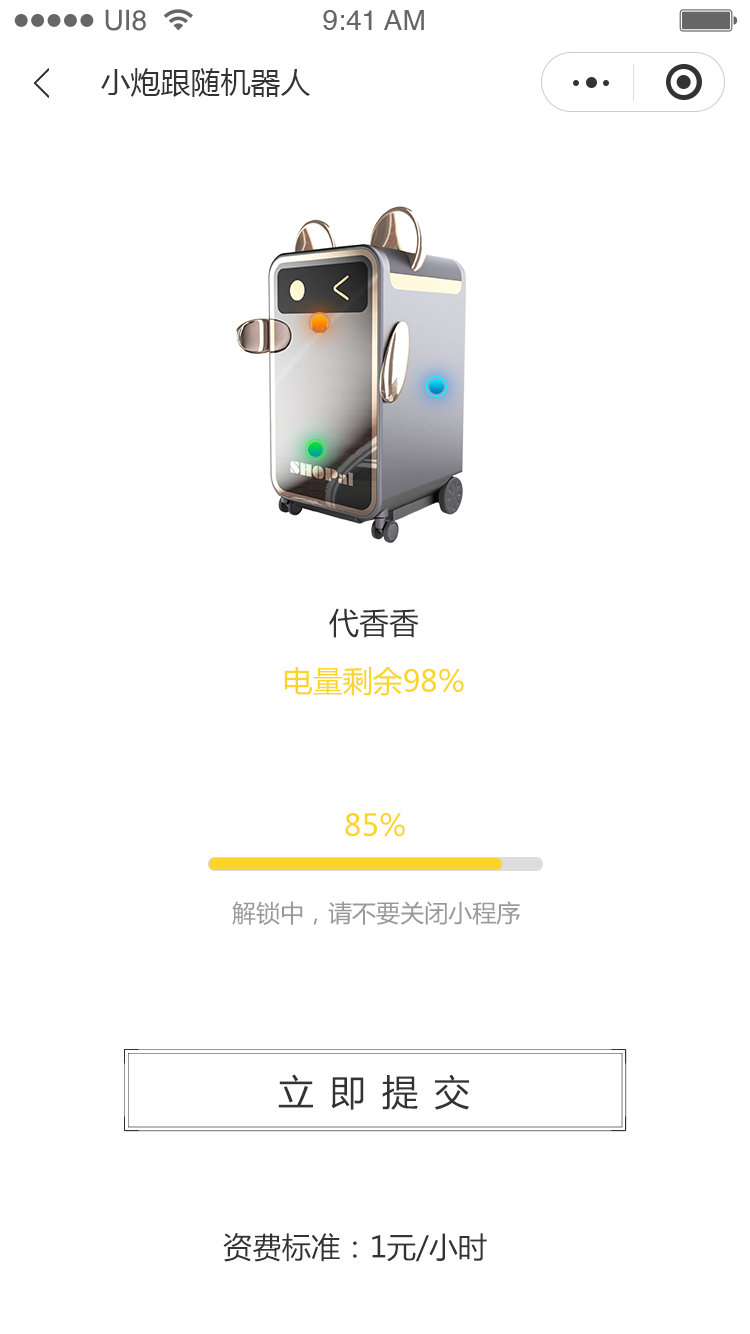
<style>
.page{position:relative;width:750px;height:1334px;background:#ffffff}
.page>*{position:absolute;margin:0}
.t1{font:28.1px "Helvetica";color:#666666}
.t2{font:30px "MicrosoftYaHei";color:#333333}
.t3{font:30px "MicrosoftYaHei";color:#fbd52a}
.t4{font:24px "MicrosoftYaHei";color:#999999}
.t5{font:36.1px "MicrosoftYaHei";letter-spacing:0.44em;color:#333333}
.t6{font:29.3px "MicrosoftYaHei";color:#333333}
</style>
<div class="page">
<p class="t1" style="left:105px;top:9px;width:41px;height:22px">UI8</p>
<p class="t1" style="left:323px;top:10px;width:101px;height:20px">9:41 AM</p>
<p class="t2" style="left:101px;top:68px;width:210px;height:29px">小炮跟随机器人</p>
<p class="t2" style="left:329px;top:608px;width:90px;height:30px">代香香</p>
<p class="t3" style="left:284px;top:667px;width:180px;height:29px">电量剩余98%</p>
<p class="t3" style="left:345px;top:813px;width:60px;height:24px">85%</p>
<p class="t4" style="left:232px;top:901px;width:288px;height:24px">解锁中，请不要关闭小程序</p>
<p class="t5" style="left:278px;top:1074px;width:192px;height:36px">立即提交</p>
<p class="t6" style="left:223px;top:1233px;width:264px;height:29px">资费标准：1元/小时</p>
</div>
